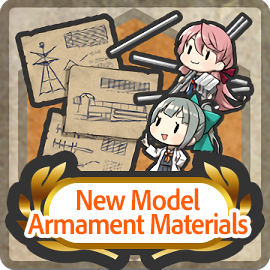
<style>
.page{position:relative;width:270px;height:270px}
.page>*{position:absolute;margin:0}
.t1{font:30px/24px "AdobeClean-Bold";letter-spacing:-0.04em;color:#ff5d00;scale:0.9 1}
</style>
<div class="page">
<p class="t1" style="left:28px;top:188px;width:220px;height:47px;text-align:center">New Model<br>Armament Materials</p>
</div>
